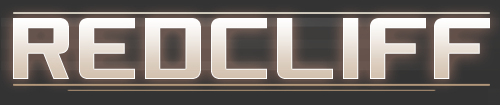
<style>
.page{position:relative;width:500px;height:105px}
.page>*{position:absolute;margin:0}
.t1{font:104px "MonkirtaPursuitNC"}
.t2{font:104px "MonkirtaPursuitNC";letter-spacing:0.02em}
.t3{font:104px "MonkirtaPursuitNC";letter-spacing:-0.02em}
.t4{font:104px "MonkirtaPursuitNC";letter-spacing:0.04em}
</style>
<div class="page">
<p class="t1" style="left:13px;top:18px;width:477px;height:61px">REDCL<span class="t2">I</span><span class="t3">F</span><span class="t4">F</span></p>
</div>
